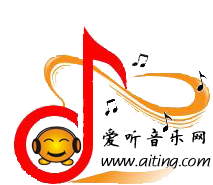
<style>
.page{position:relative;width:213px;height:185px;background:#ffffff}
.page>*{position:absolute;margin:0}
.t1{font:21.3px "hakuyokaishu7000";color:#000000;font-weight:bold}
.t2{font:16px "hakuyokaishu7000";color:#000000;font-weight:bold}
</style>
<div class="page">
<p class="t1" style="left:102px;top:128px;width:104px;height:21px">爱听音乐网</p>
<p class="t2" style="left:101px;top:154px;width:110px;height:15px">www.aiting.com</p>
</div>
